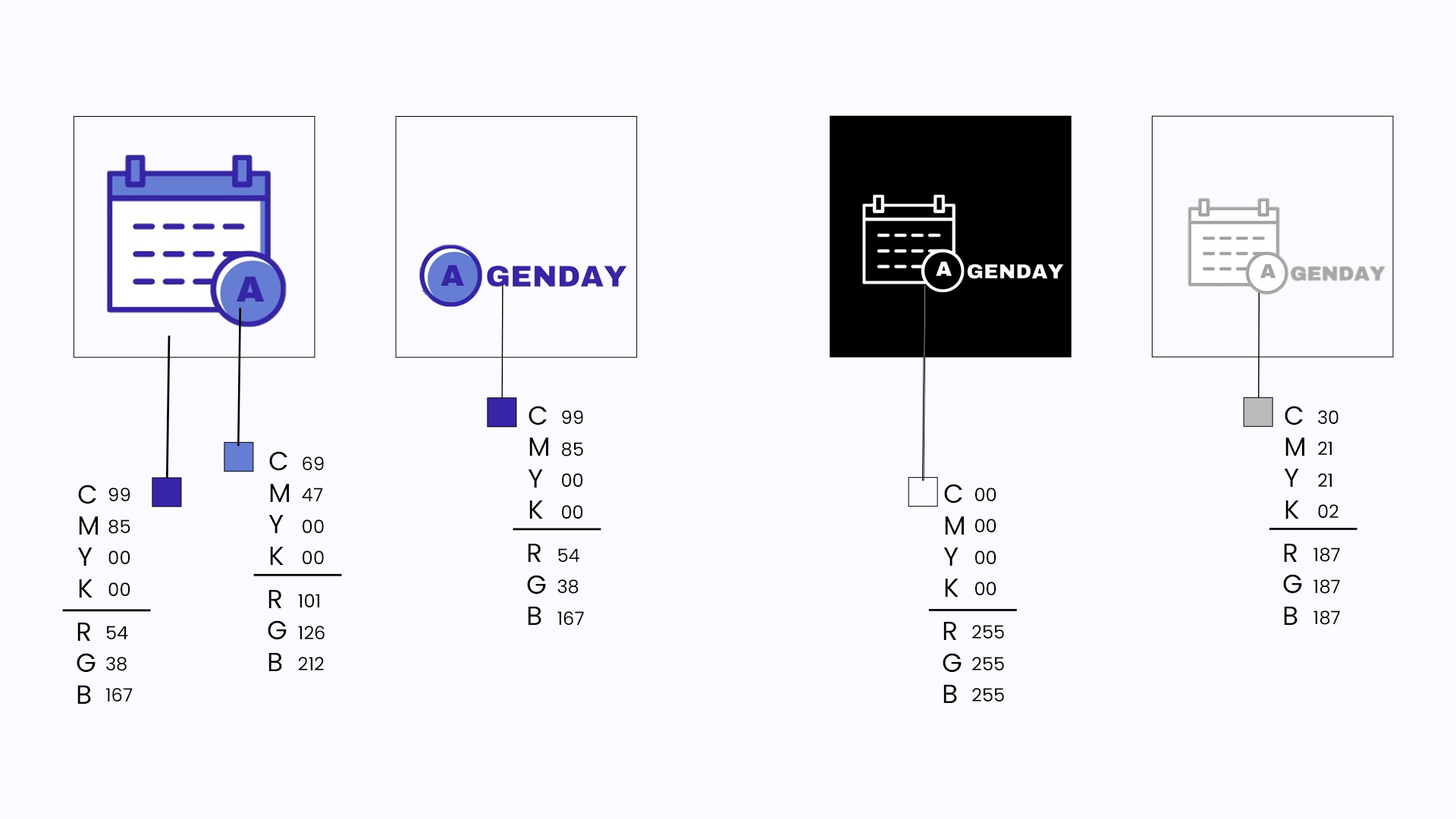
<style>
.page{position:relative;width:1456px;height:819px;background:#fbfbff}
.page>*{position:absolute;margin:0}
.t1{font:26.2px "Poppins-Regular";color:#000000}
.t2{font:18.3px/15.7px "Poppins-Regular";color:#000000}
</style>
<div class="page">
<p class="t1" style="left:528px;top:406px;width:20px;height:113px">C<br>M<br>Y<br>K</p>
<p class="t2" style="left:562px;top:410px;width:21px;height:109px">99<br><br>85<br><br>00<br><br>00</p>
<p class="t1" style="left:1284px;top:406px;width:20px;height:113px">C<br>M<br>Y<br>K</p>
<p class="t2" style="left:1318px;top:410px;width:20px;height:108px">30 <br><br>21<br><br>21<br><br>02</p>
<p class="t1" style="left:268px;top:451px;width:21px;height:114px">C<br>M<br>Y<br>K</p>
<p class="t2" style="left:302px;top:457px;width:22px;height:107px">69<br><br>47<br><br>00<br><br>00</p>
<p class="t1" style="left:77px;top:485px;width:21px;height:113px">C<br>M<br>Y<br>K</p>
<p class="t1" style="left:943px;top:484px;width:21px;height:113px">C<br>M<br>Y<br>K</p>
<p class="t2" style="left:108px;top:488px;width:22px;height:108px">99<br><br>85<br><br>00<br><br>00</p>
<p class="t2" style="left:975px;top:488px;width:21px;height:107px">00<br><br>00<br><br>00<br><br>00</p>
<p class="t1" style="left:527px;top:544px;width:19px;height:81px">R <br>G<br>B</p>
<p class="t1" style="left:1283px;top:544px;width:19px;height:81px">R <br>G<br>B</p>
<p class="t2" style="left:557px;top:548px;width:27px;height:77px">54<br><br>38<br><br>167</p>
<p class="t2" style="left:1313px;top:548px;width:27px;height:77px">187<br><br>187<br><br>187</p>
<p class="t1" style="left:268px;top:590px;width:19px;height:81px">R <br>G<br>B</p>
<p class="t2" style="left:298px;top:594px;width:27px;height:76px">101<br><br>126<br><br>212</p>
<p class="t1" style="left:77px;top:623px;width:19px;height:81px">R <br>G<br>B</p>
<p class="t2" style="left:106px;top:626px;width:27px;height:75px">54<br><br>38<br><br>167</p>
<p class="t1" style="left:943px;top:622px;width:19px;height:81px">R <br>G<br>B</p>
<p class="t2" style="left:972px;top:625px;width:32px;height:76px">255<br><br>255<br><br>255</p>
</div>
